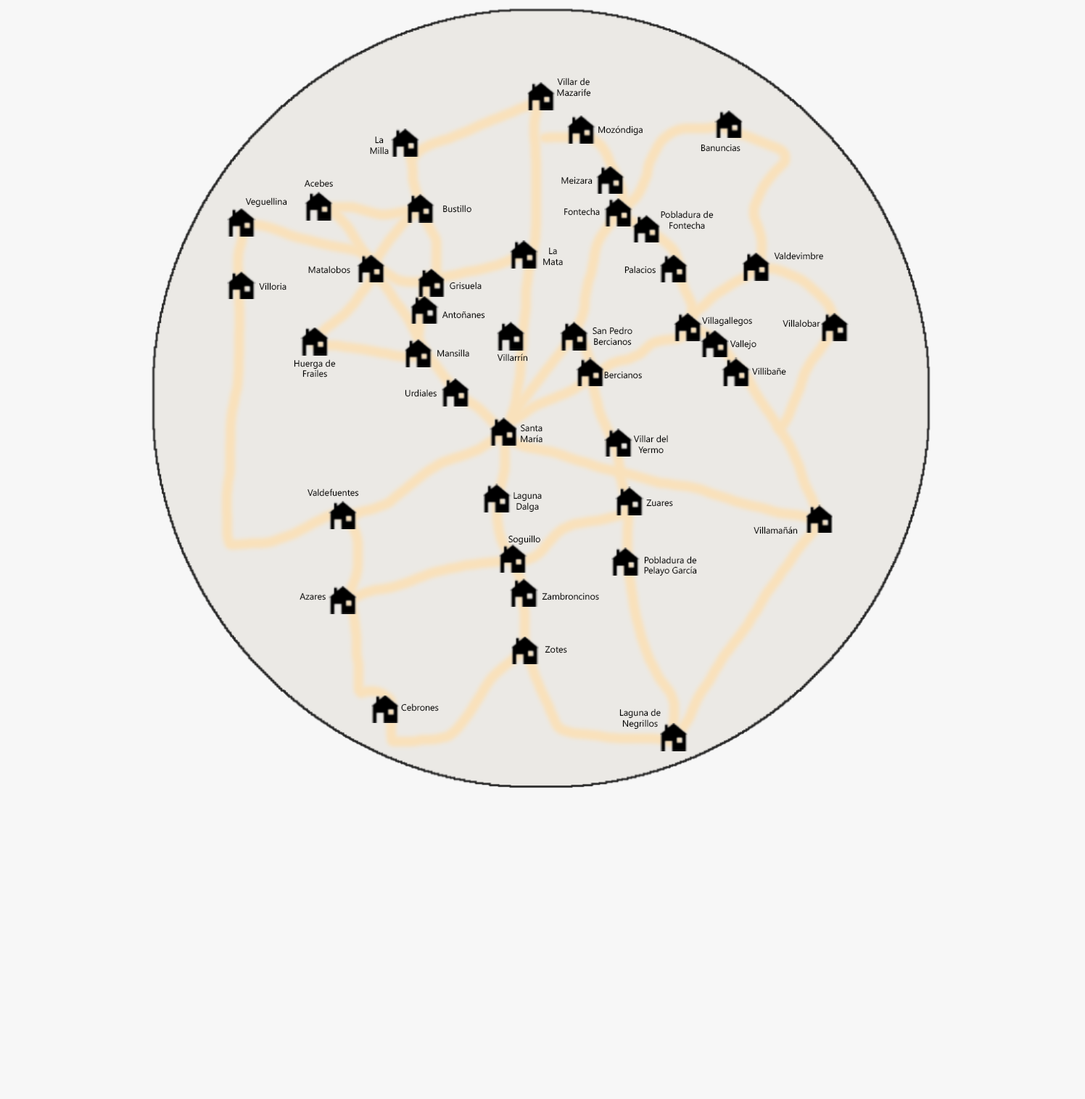
<style>
.page{position:relative;width:1085px;height:1099px;background:#f7f7f7}
.page>*{position:absolute;margin:0}
.t1{font:9.1px "NirmalaUI";color:#000000}
</style>
<div class="page">
<p class="t1" style="left:557px;top:78px;width:34px;height:19px;text-align:center">Villar de Mazarife</p>
<p class="t1" style="left:599px;top:126px;width:44px;height:10px">Mozóndiga</p>
<p class="t1" style="left:370px;top:136px;width:19px;height:19px;text-align:center">La Milla</p>
<p class="t1" style="left:701px;top:144px;width:40px;height:8px">Banuncias</p>
<p class="t1" style="left:304px;top:179px;width:29px;height:8px">Acebes</p>
<p class="t1" style="left:562px;top:176px;width:31px;height:8px">Meizara</p>
<p class="t1" style="left:245px;top:197px;width:42px;height:11px">Veguellina</p>
<p class="t1" style="left:443px;top:205px;width:29px;height:8px">Bustillo</p>
<p class="t1" style="left:565px;top:208px;width:35px;height:7px">Fontecha</p>
<p class="t1" style="left:661px;top:210px;width:53px;height:19px;text-align:center">Pobladura de Fontecha</p>
<p class="t1" style="left:543px;top:247px;width:20px;height:19px;text-align:center">La Mata</p>
<p class="t1" style="left:774px;top:252px;width:50px;height:8px">Valdevimbre</p>
<p class="t1" style="left:308px;top:266px;width:42px;height:8px">Matalobos</p>
<p class="t1" style="left:625px;top:266px;width:31px;height:8px">Palacios</p>
<p class="t1" style="left:450px;top:282px;width:32px;height:8px">Grisuela</p>
<p class="t1" style="left:259px;top:282px;width:28px;height:8px">Villoria</p>
<p class="t1" style="left:442px;top:311px;width:43px;height:8px">Antoñanes</p>
<p class="t1" style="left:702px;top:316px;width:50px;height:11px">Villagallegos</p>
<p class="t1" style="left:593px;top:327px;width:40px;height:18px;text-align:center">San Pedro Bercianos</p>
<p class="t1" style="left:783px;top:319px;width:38px;height:8px">Villalobar</p>
<p class="t1" style="left:730px;top:340px;width:27px;height:10px">Vallejo</p>
<p class="t1" style="left:438px;top:349px;width:31px;height:8px">Mansilla</p>
<p class="t1" style="left:497px;top:353px;width:31px;height:8px">Villarrín</p>
<p class="t1" style="left:294px;top:359px;width:42px;height:18px;text-align:center">Huerga de Frailes</p>
<p class="t1" style="left:604px;top:371px;width:38px;height:8px">Bercianos</p>
<p class="t1" style="left:752px;top:367px;width:35px;height:8px">Villibañe</p>
<p class="t1" style="left:405px;top:389px;width:32px;height:8px">Urdiales</p>
<p class="t1" style="left:521px;top:424px;width:22px;height:19px;text-align:center">Santa María</p>
<p class="t1" style="left:633px;top:435px;width:35px;height:18px;text-align:center">Villar del Yermo</p>
<p class="t1" style="left:308px;top:488px;width:51px;height:8px">Valdefuentes</p>
<p class="t1" style="left:514px;top:492px;width:28px;height:20px;text-align:center">Laguna Dalga</p>
<p class="t1" style="left:646px;top:499px;width:27px;height:7px">Zuares</p>
<p class="t1" style="left:754px;top:526px;width:44px;height:8px">Villamañán</p>
<p class="t1" style="left:509px;top:535px;width:32px;height:10px">Soguillo</p>
<p class="t1" style="left:644px;top:556px;width:53px;height:20px;text-align:center">Pobladura de Pelayo García</p>
<p class="t1" style="left:300px;top:593px;width:26px;height:7px">Azares</p>
<p class="t1" style="left:542px;top:592px;width:57px;height:8px">Zambroncinos</p>
<p class="t1" style="left:545px;top:646px;width:22px;height:7px">Zotes</p>
<p class="t1" style="left:401px;top:703px;width:38px;height:8px">Cebrones</p>
<p class="t1" style="left:620px;top:708px;width:41px;height:21px;text-align:center">Laguna de Negrillos</p>
</div>
